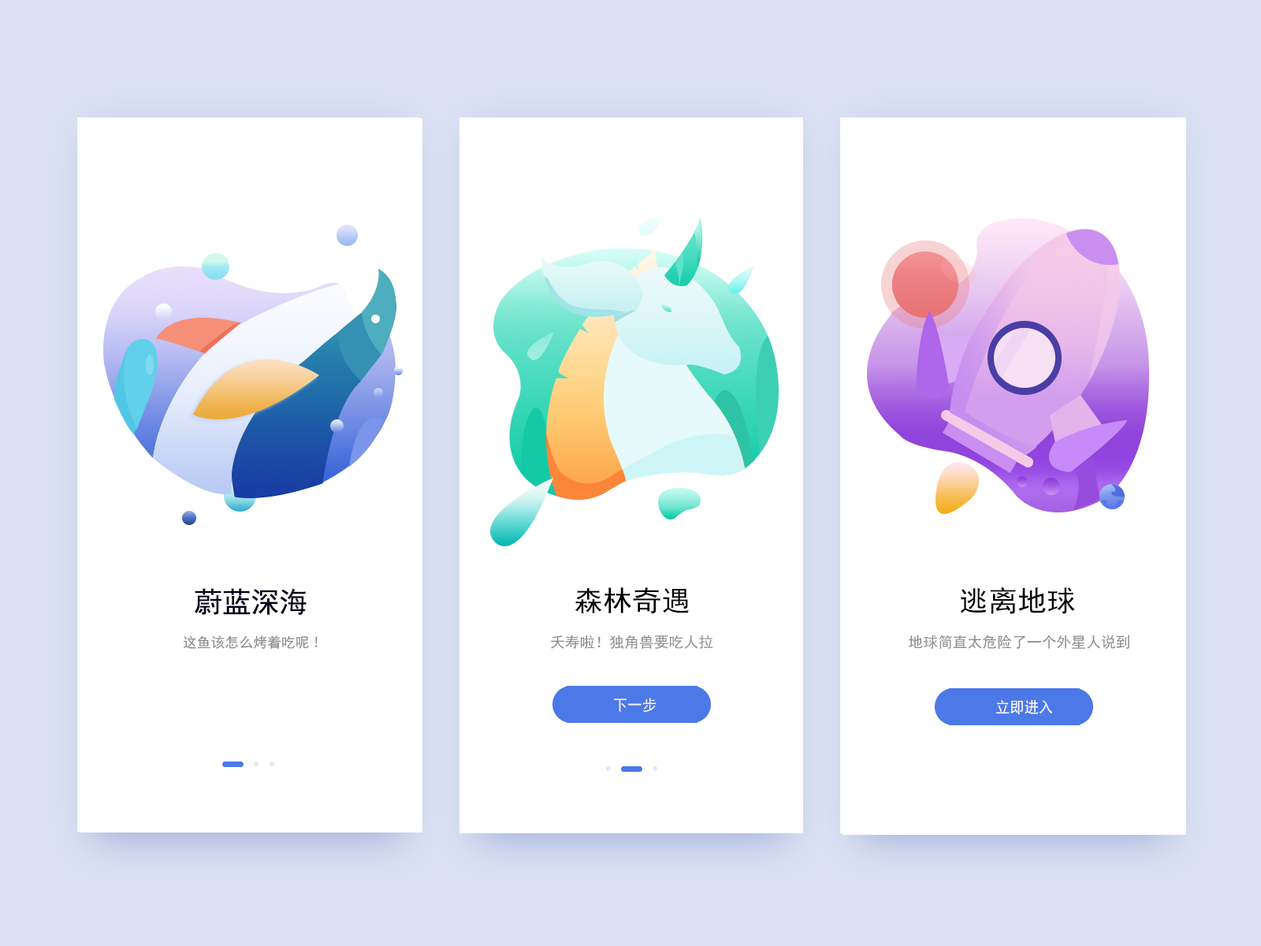
<style>
.page{position:relative;width:1261px;height:946px;background:#ffffff}
.page>*{position:absolute;margin:0}
.t1{font:28.4px "SimHei";color:#000017}
.t2{font:28.7px "SimHei";color:#000000}
.t3{font:14px "SimHei";color:#8e8e8e}
.t4{font:14.7px "SimHei";color:#8d8d8d}
.t5{font:15.5px "SimHei";color:#fbf6f6;scale:0.93 1}
</style>
<div class="page">
<p class="t1" style="left:195px;top:588px;width:112px;height:27px">蔚蓝深海</p>
<p class="t2" style="left:575px;top:587px;width:114px;height:27px">森林奇遇</p>
<p class="t2" style="left:960px;top:587px;width:115px;height:27px">逃离地球</p>
<p class="t3" style="left:183px;top:635px;width:135px;height:14px">这鱼该怎么烤着吃呢!</p>
<p class="t4" style="left:551px;top:634px;width:162px;height:15px">夭寿啦！独角兽要吃人拉</p>
<p class="t4" style="left:909px;top:634px;width:220px;height:15px">地球简直太危险了一个外星人说到</p>
<p class="t5" style="left:614px;top:697px;width:42px;height:15px">下一步</p>
<p class="t5" style="left:995px;top:699px;width:58px;height:16px">立即进入</p>
</div>
